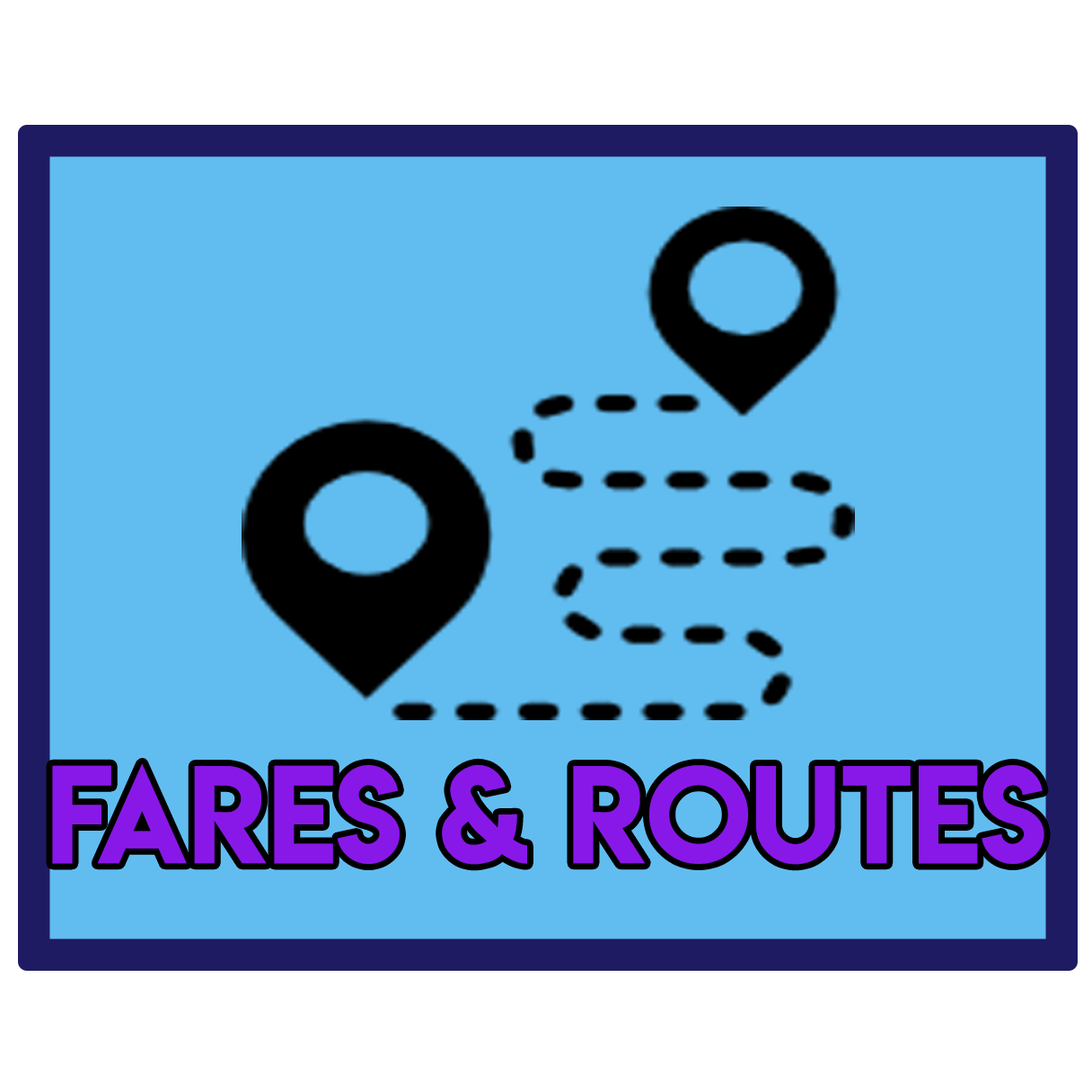
<style>
.page{position:relative;width:1092px;height:1092px;background:#61bdf0}
.page>*{position:absolute;margin:0}
.t1{font:123.2px "LemonMilk";color:#8818e8}
</style>
<div class="page">
<p class="t1" style="left:52px;top:763px;width:992px;height:102px">FARES &amp; ROUTES</p>
</div>
